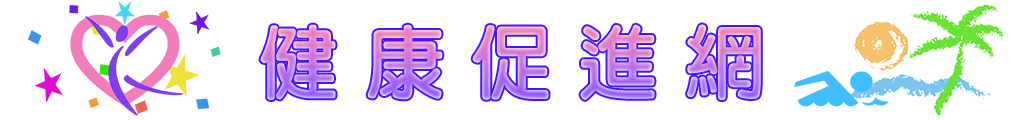
<style>
.page{position:relative;width:1024px;height:120px;background:#ffffff}
.page>*{position:absolute;margin:0}
.t1{font:80px "DFLiYuanStd-W7"}
</style>
<div class="page">
<p class="t1" style="left:260px;top:24px;width:501px;height:76px">健 康 促 進 網</p>
</div>
